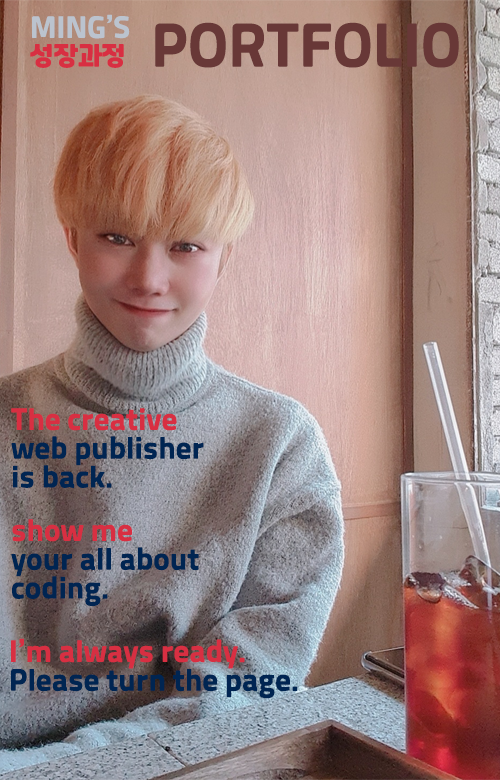
<style>
.page{position:relative;width:500px;height:780px}
.page>*{position:absolute;margin:0}
.t1{font:24px "RecipekoreaM";color:#bbc3ce}
.t2{font:24px "RecipekoreaM";color:#d82f42}
.t3{font:48px "RecipekoreaM";color:#683837}
.t4{font:24px "RecipekoreaM";color:#002552}
</style>
<div class="page">
<p class="t1" style="left:30px;top:14px;width:100px;height:54px">MING’S<br><span class="t2">성장과정</span></p>
<p class="t3" style="left:155px;top:22px;width:304px;height:46px">PORTFOLIO</p>
<p class="t4" style="left:11px;top:408px;width:193px;height:80px"><span class="t2">The creative</span> <br>web publisher <br>is back.</p>
<p class="t4" style="left:11px;top:519px;width:188px;height:87px"><span class="t2">show me<br></span>your all about <br>coding.</p>
<p class="t4" style="left:11px;top:638px;width:287px;height:61px"><span class="t2">I’m always ready.<br></span>Please turn the page.</p>
</div>
